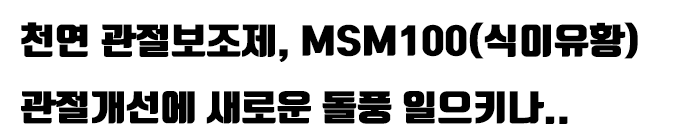
<style>
.page{position:relative;width:700px;height:137px;background:#ffffff}
.page>*{position:absolute;margin:0}
.t1{font:35px/66.7px "TmonMonsoriOTFBlack";color:#000000;scale:1.11 1}
</style>
<div class="page">
<p class="t1" style="left:21px;top:22px;width:617px;height:102px">천연 관절보조제, MSM100(식이유황)<br>관절개선에 새로운 돌풍 일으키나..</p>
</div>
